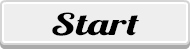
<style>
.page{position:relative;width:190px;height:49px;background:#eeeeee}
.page>*{position:absolute;margin:0}
.t1{font:30px "Lobster1.4";color:#000000;scale:1.44 1}
</style>
<div class="page">
<p class="t1" style="left:52px;top:12px;width:87px;height:24px">Start</p>
</div>
